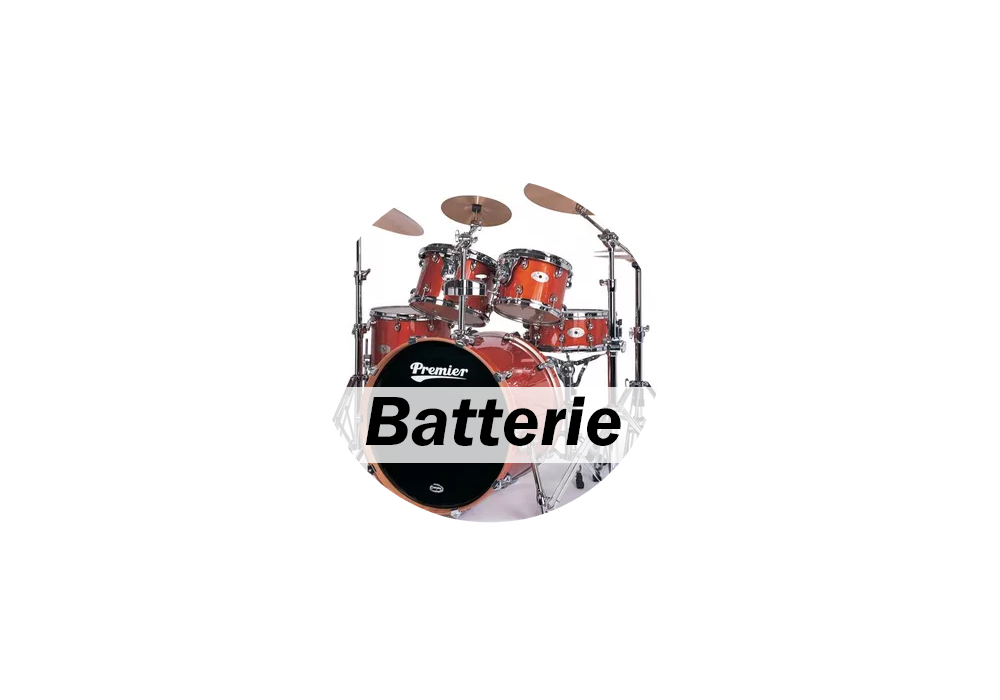
<style>
.page{position:relative;width:1000px;height:700px;background:#ffffff}
.page>*{position:absolute;margin:0}
.t1{font:72px "FranklinGothic-DemiItalic";color:#000000}
</style>
<div class="page">
<p class="t1" style="left:365px;top:396px;width:256px;height:50px">Batterie</p>
</div>
